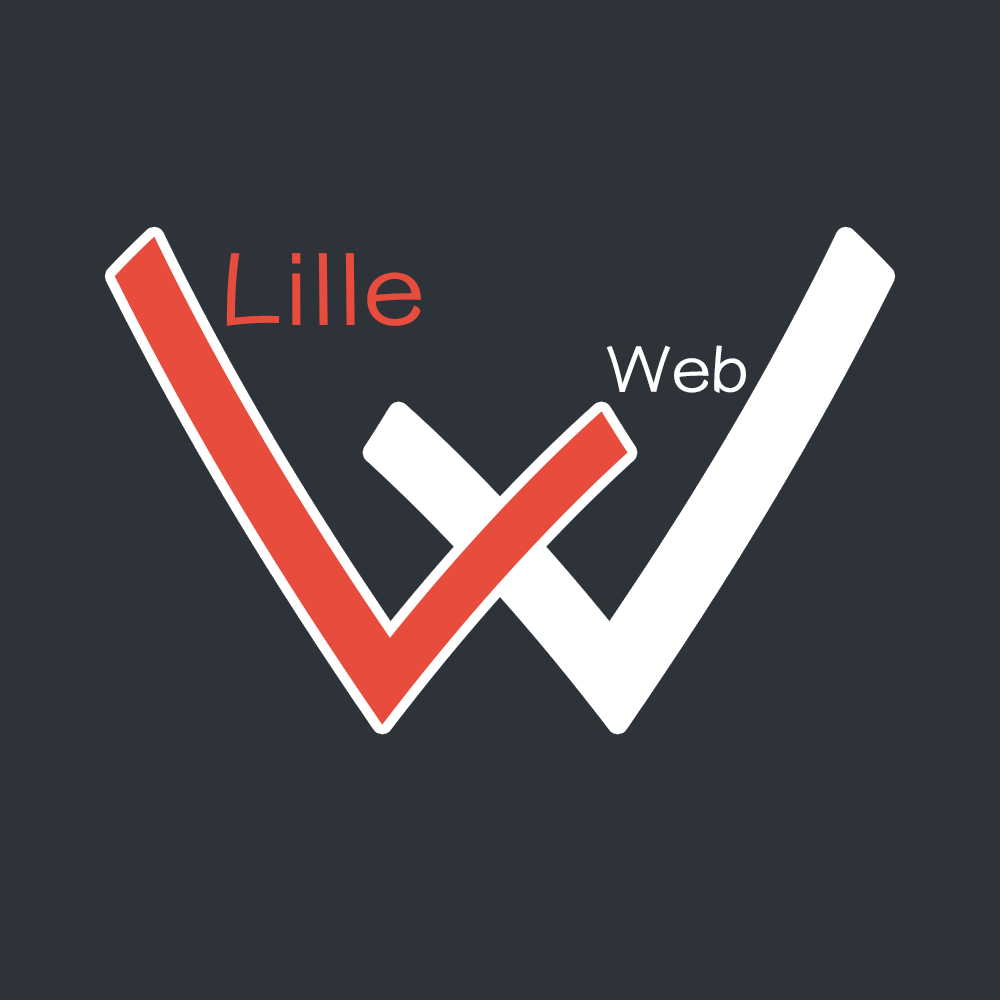
<style>
.page{position:relative;width:1000px;height:1000px;background:#2d3339}
.page>*{position:absolute;margin:0}
.t1{font:699.3px "YuppyTC-Regular";color:#e74c3c;font-style:italic;scale:1.1 1}
.t2{font:699.3px "YuppyTC-Regular";color:#ffffff;font-style:italic;scale:1.1 1}
.t3{font:100px "YuppyTC-Regular";letter-spacing:0.02em;color:#e74c3c;scale:1.1 1}
.t4{font:64.5px "YuppyTC-Regular";color:#ffffff;scale:1.1 1}
</style>
<div class="page">
<p class="t1" style="left:114px;top:236px;width:514px;height:489px;rotate:-45deg">L</p>
<p class="t2" style="left:372px;top:236px;width:514px;height:489px;rotate:-135deg">L</p>
<p class="t3" style="left:226px;top:253px;width:195px;height:73px">Lille</p>
<p class="t4" style="left:606px;top:345px;width:140px;height:48px">Web</p>
</div>
